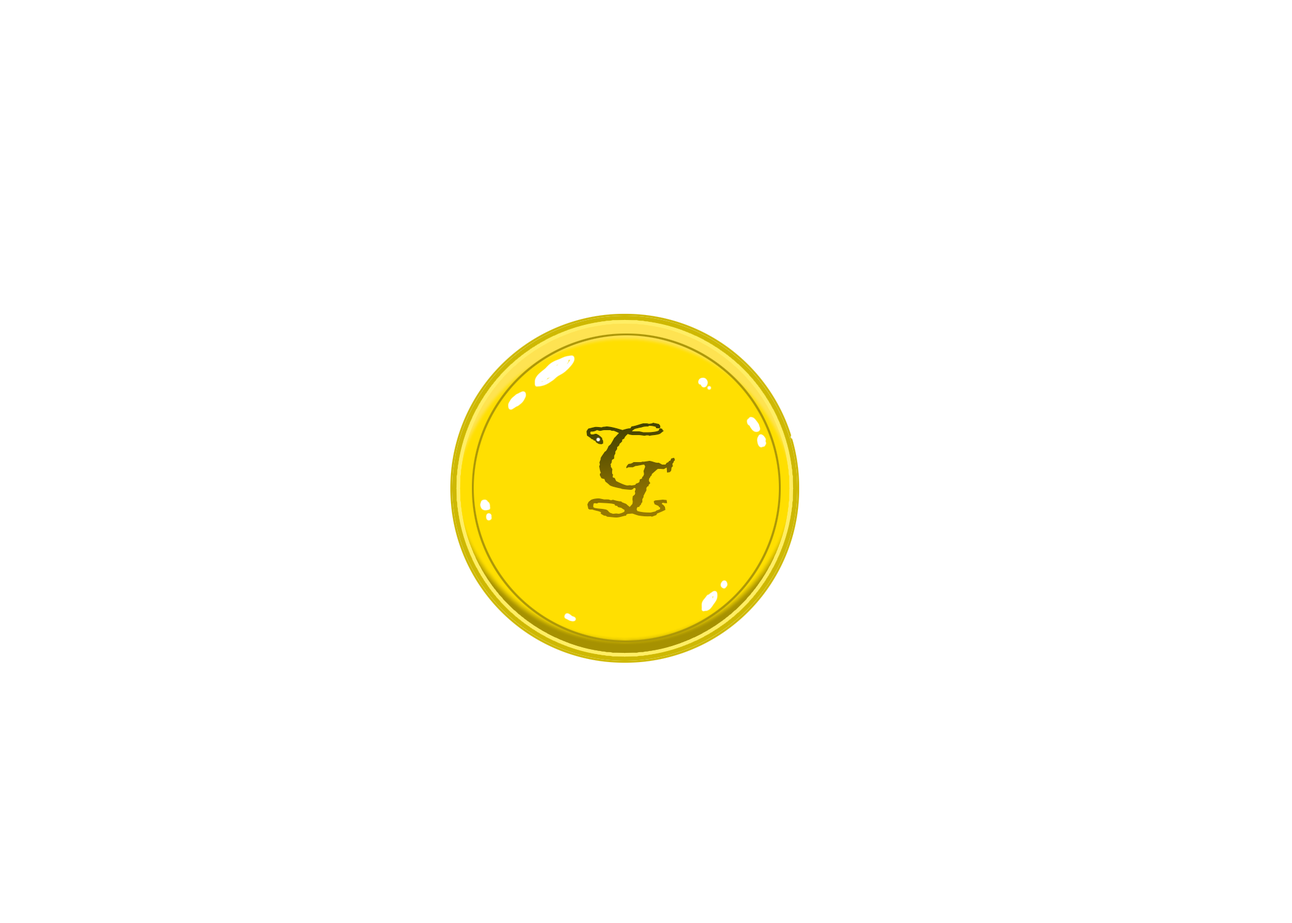
<style>
.page{position:relative;width:1292px;height:923px;background:#ffffff}
.page>*{position:absolute;margin:0}
.t1{font:115.4px "BlackadderITC-Regular"}
</style>
<div class="page">
<p class="t1" style="left:586px;top:423px;width:89px;height:94px">G</p>
</div>
